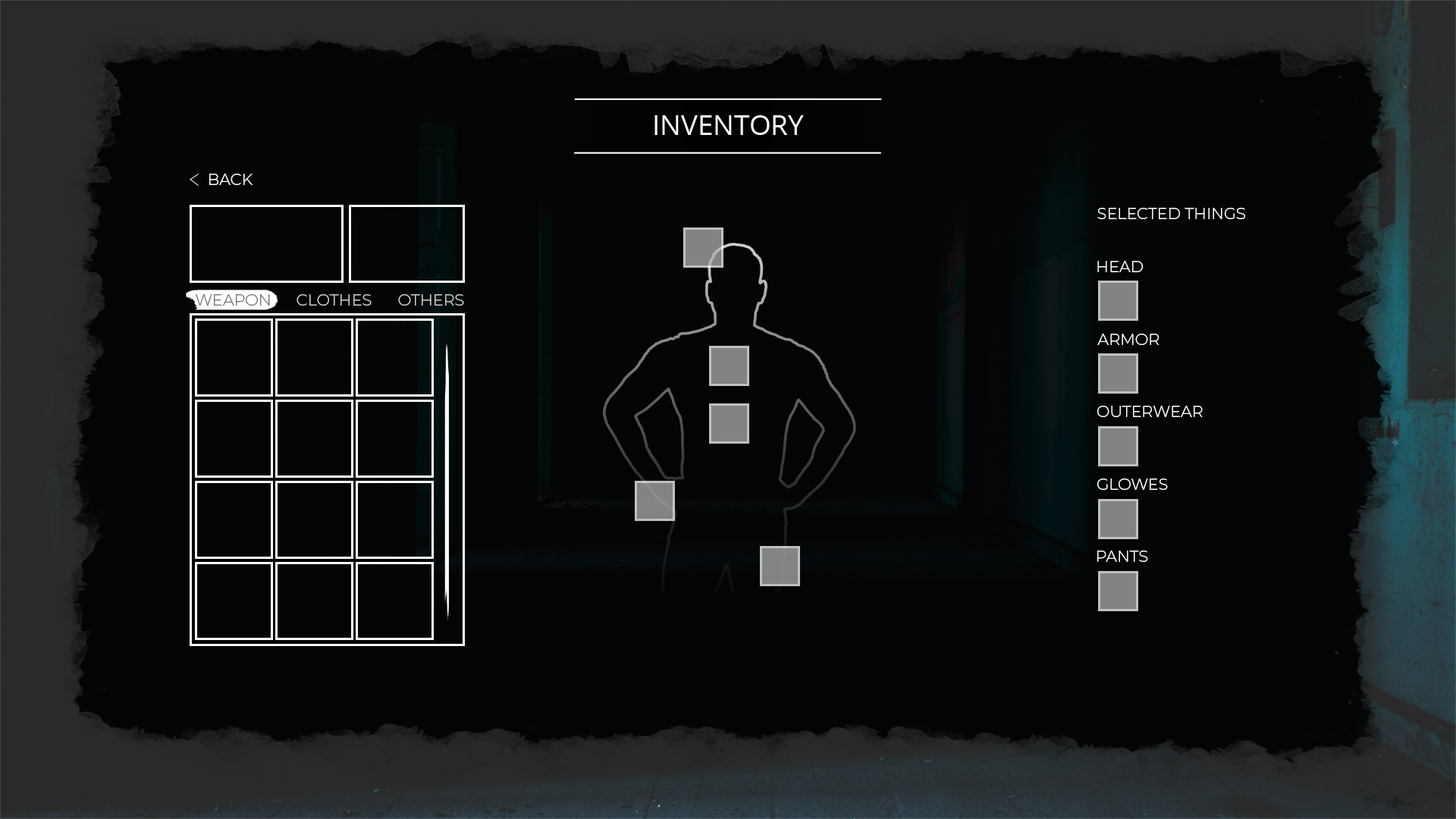
<style>
.page{position:relative;width:1456px;height:819px;background:#040404}
.page>*{position:absolute;margin:0}
.t1{font:27.7px "OpenSans-Regular";color:#ffffff}
.t2{font:15.8px "Montserrat-Light";color:#ffffff}
.t3{font:15.8px "Montserrat-Light";color:#737373}
.t4{font:15.8px "Montserrat-Light";color:#cccccc}
.t5{font:15.8px "Montserrat-Light";color:#cccdcd}
.t6{font:15.8px "Montserrat-Light";color:#ffffff;text-transform:uppercase}
</style>
<div class="page">
<p class="t1" style="left:654px;top:115px;width:150px;height:20px">INVENTORY</p>
<p class="t2" style="left:209px;top:174px;width:44px;height:11px">BACK</p>
<p class="t2" style="left:1097px;top:208px;width:148px;height:11px">SELECTED THINGS</p>
<p class="t2" style="left:1097px;top:261px;width:46px;height:11px">HEAD</p>
<p class="t3" style="left:196px;top:294px;width:74px;height:12px">WEAPON</p>
<p class="t4" style="left:297px;top:294px;width:75px;height:12px">CLOTHES</p>
<p class="t5" style="left:398px;top:294px;width:66px;height:12px">OTHERS</p>
<p class="t2" style="left:1097px;top:334px;width:62px;height:11px">ARMOR</p>
<p class="t6" style="left:1097px;top:406px;width:106px;height:11px">outerwear</p>
<p class="t2" style="left:1097px;top:479px;width:71px;height:11px">GLOWES</p>
<p class="t2" style="left:1097px;top:551px;width:51px;height:11px">PANTS</p>
</div>
